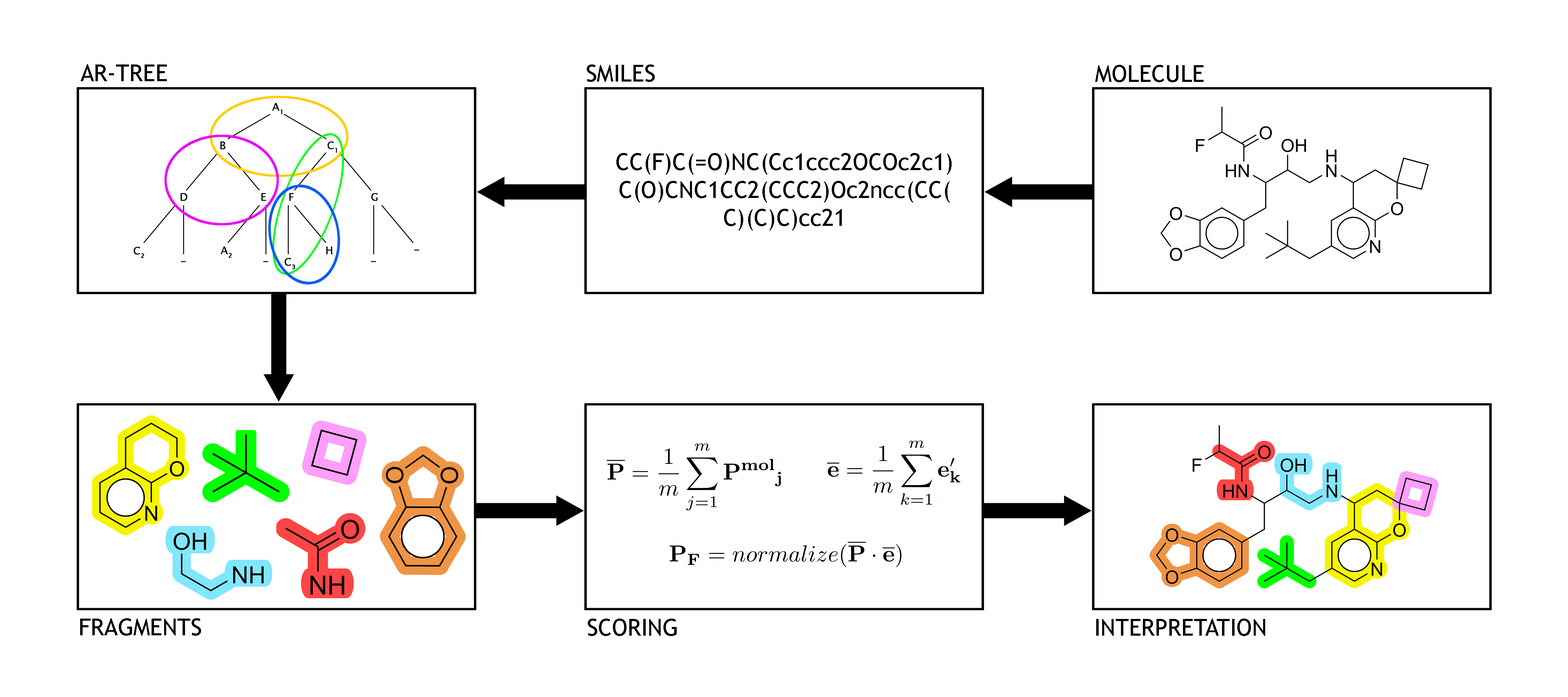
<style>
.page{position:relative;width:1568px;height:697px;background:#ffffff}
.page>*{position:absolute;margin:0}
.t1{font:23.2px "TrebuchetMS";color:#000000}
</style>
<div class="page">
<p class="t1" style="left:80px;top:64px;width:87px;height:17px">AR-TREE</p>
<p class="t1" style="left:587px;top:64px;width:68px;height:18px">SMILES</p>
<p class="t1" style="left:1095px;top:65px;width:109px;height:17px">MOLECULE</p>
<p class="t1" style="left:616px;top:153px;width:336px;height:78px;text-align:center">CC(F)C(=O)NC(Cc1ccc2OCOc2c1)<br>C(O)CNC1CC2(CCC2)Oc2ncc(CC(<br>C)(C)C)cc21</p>
<p class="t1" style="left:80px;top:618px;width:121px;height:18px">FRAGMENTS</p>
<p class="t1" style="left:588px;top:618px;width:89px;height:18px">SCORING</p>
<p class="t1" style="left:1096px;top:618px;width:169px;height:18px">INTERPRETATION</p>
</div>
